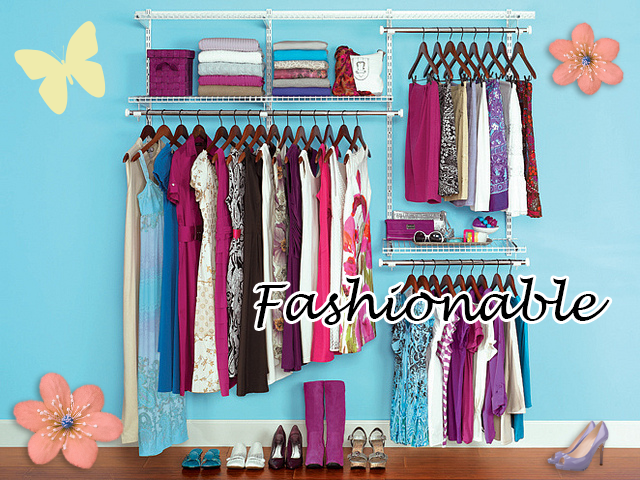
<style>
.page{position:relative;width:640px;height:480px}
.page>*{position:absolute;margin:0}
.t1{font:50px "LucidaHandwriting-Italic";color:#000000}
</style>
<div class="page">
<p class="t1" style="left:255px;top:277px;width:355px;height:51px">Fashionable</p>
</div>
